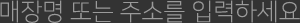
<style>
.page{position:relative;width:300px;height:23px;background:#333333}
.page>*{position:absolute;margin:0}
.t1{font:24px "NanumSquareL";color:#9a9a9a}
</style>
<div class="page">
<p class="t1" style="left:0px;top:0px;width:300px;height:23px">매장명 또는 주소를 입력하세요</p>
</div>
